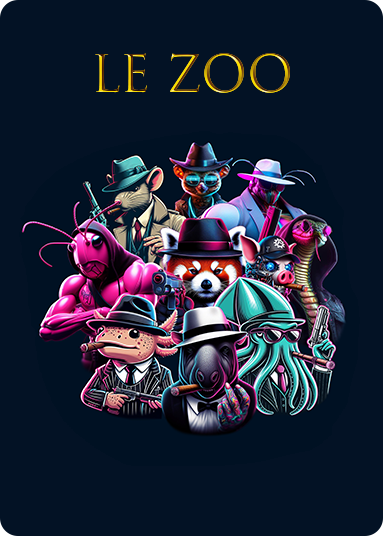
<style>
.page{position:relative;width:383px;height:536px;background:#031225}
.page>*{position:absolute;margin:0}
.t1{font:50px "TrajanColor-Concept"}
</style>
<div class="page">
<p class="t1" style="left:95px;top:53px;width:195px;height:40px">Le Zoo</p>
</div>
